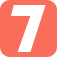
<style>
.page{position:relative;width:57px;height:57px;background:#f96e5b}
.page>*{position:absolute;margin:0}
.t1{font:69px "Mouser";letter-spacing:0.025em;color:#ffffff}
</style>
<div class="page">
<p class="t1" style="left:10px;top:5px;width:36px;height:47px">7</p>
</div>
